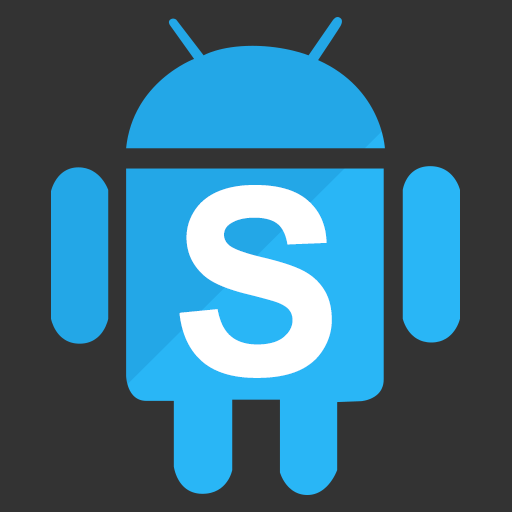
<style>
.page{position:relative;width:512px;height:512px;background:#333333}
.page>*{position:absolute;margin:0}
.t1{font:257.5px "Arial-BoldMT";letter-spacing:-0.1em;color:#ffffff;font-weight:bold}
</style>
<div class="page">
<p class="t1" style="left:179px;top:185px;width:153px;height:193px">S</p>
</div>
